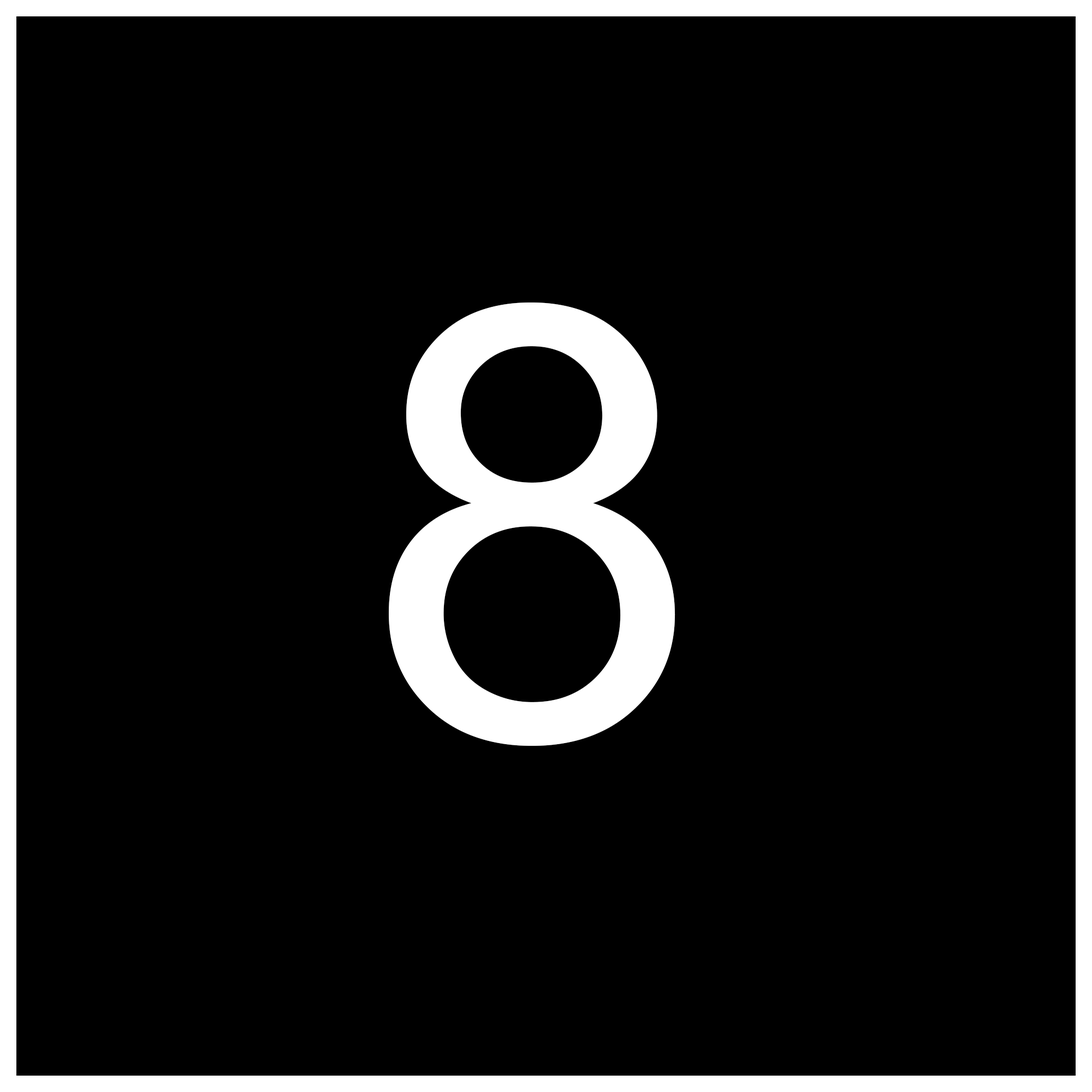
<style>
.page{position:relative;width:1092px;height:1092px;background:#000000}
.page>*{position:absolute;margin:0}
.t1{font:606.7px "ArialMT";color:#ffffff}
</style>
<div class="page">
<p class="t1" style="left:389px;top:302px;width:286px;height:444px">8</p>
</div>
